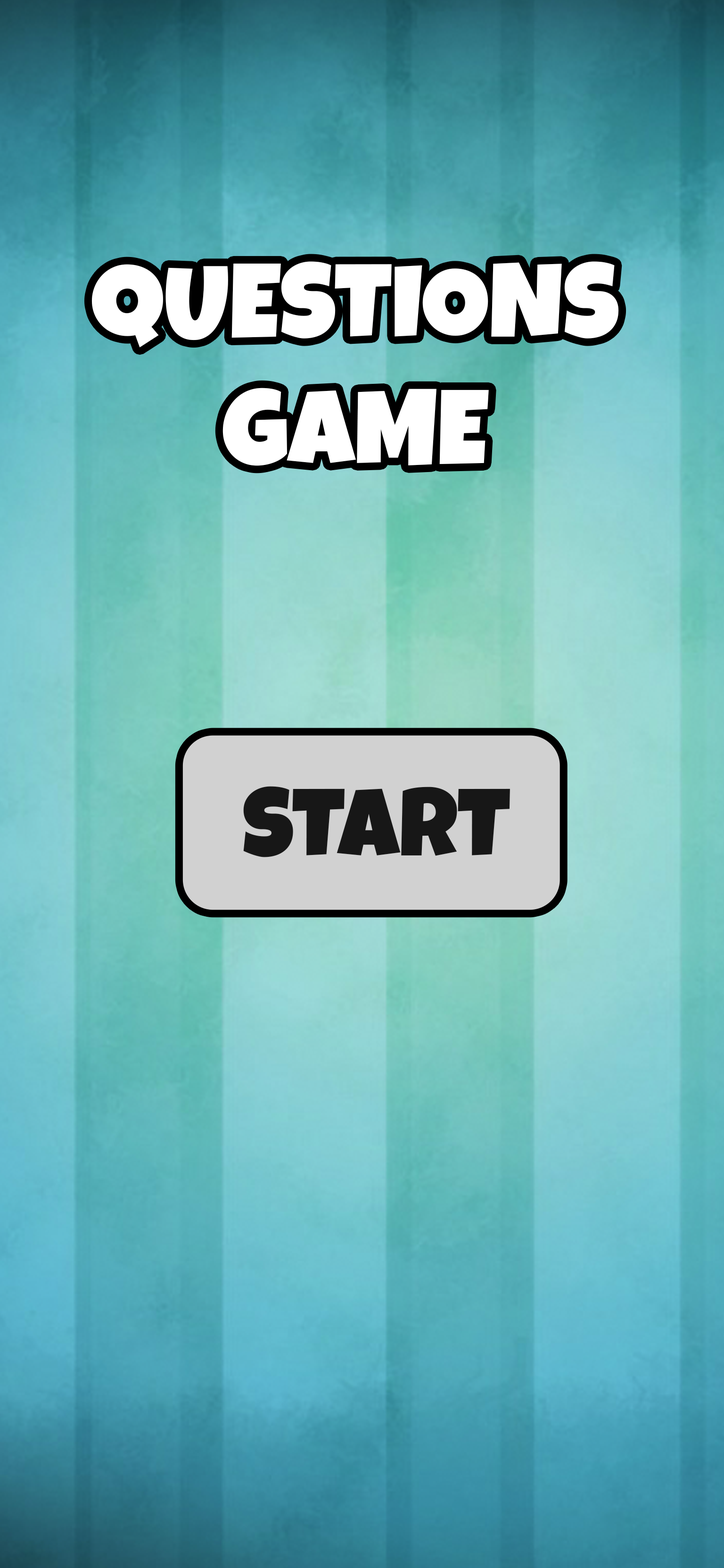
<style>
.page{position:relative;width:724px;height:1568px}
.page>*{position:absolute;margin:0}
.t1{font:105.2px "LuckiestGuy-Regular";color:#ffffff;text-transform:uppercase}
.t2{font:96.9px "LuckiestGuy-Regular";color:#171717;text-transform:uppercase}
</style>
<div class="page">
<p class="t1" style="left:91px;top:261px;width:528px;height:205px;text-align:center">Questions Game</p>
<p class="t2" style="left:243px;top:786px;width:267px;height:71px">START</p>
</div>
